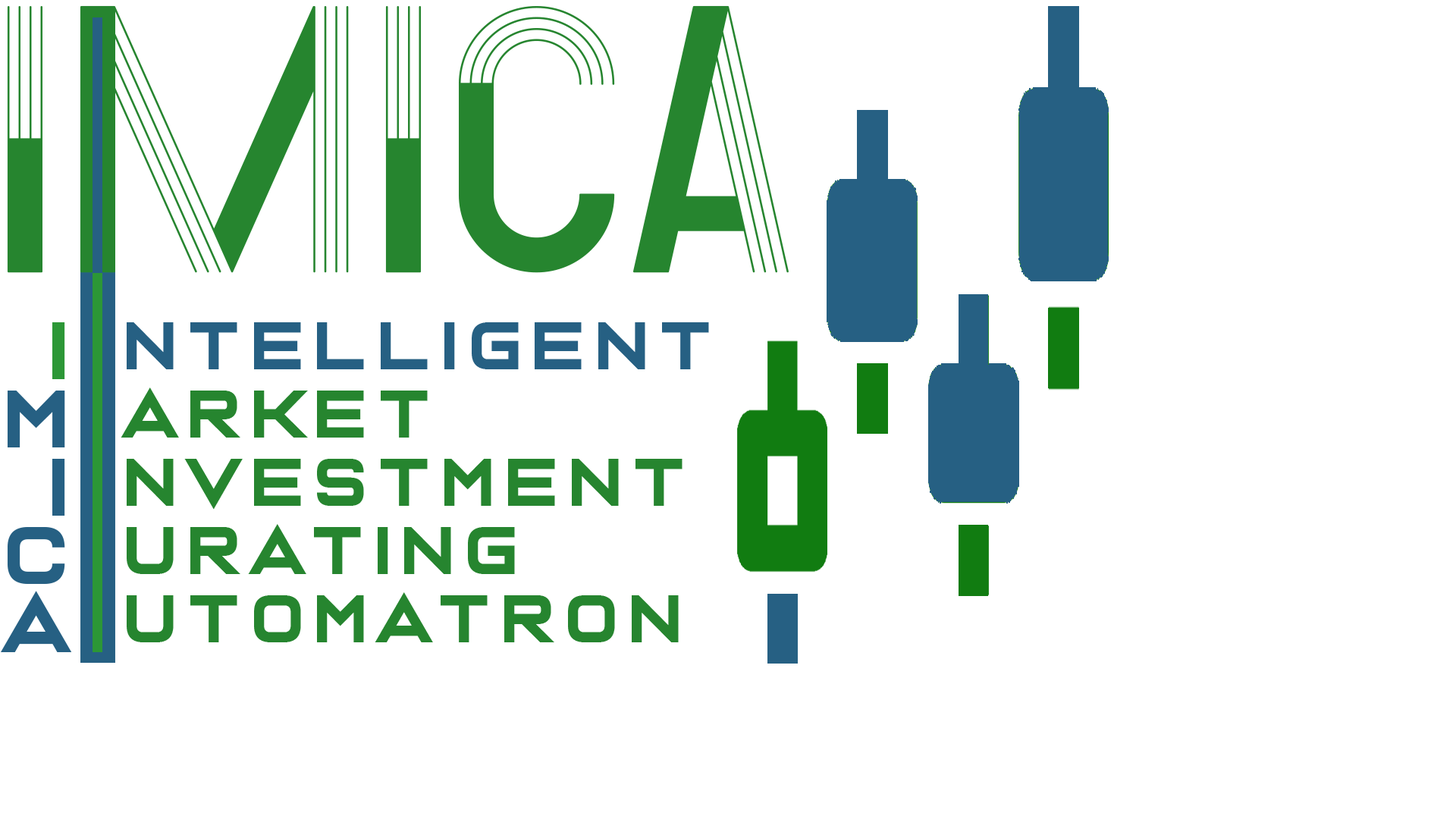
<style>
.page{position:relative;width:1456px;height:819px;background:#ffffff}
.page>*{position:absolute;margin:0}
.t1{font:379.2px "MinbusRegular";color:#26852f}
.t2{font:83.4px/68.2px "CasanovaScotia";color:#266083}
.t3{font:83.4px/68.2px "CasanovaScotia";color:#2c9736}
.t4{font:68.2px/68.2px "CasanovaScotia";letter-spacing:0.15em;color:#26852f}
.t5{font:68.2px/68.2px "CasanovaScotia";letter-spacing:0.15em;color:#266083}
</style>
<div class="page">
<p class="t1" style="left:7px;top:5px;width:782px;height:268px">iMICA</p>
<p class="t2" style="left:1px;top:322px;width:71px;height:330px;text-align:right"><span class="t3">I</span><br>M<br>I<br>C<br>A</p>
<p class="t4" style="left:121px;top:322px;width:588px;height:320px"><span class="t5">NTELLIGENT<br></span>ARKET<br>NVESTMENT<br>URATING<br>UTOMATRON</p>
</div>
